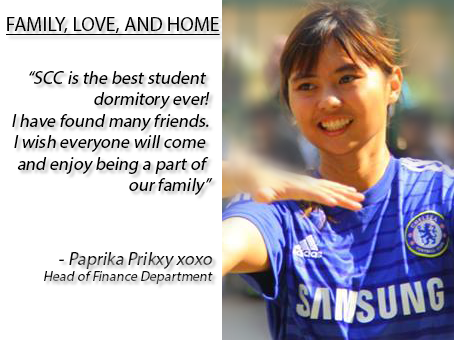
<style>
.page{position:relative;width:454px;height:340px;background:#ffffff}
.page>*{position:absolute;margin:0}
.t1{font:20px "MyriadPro-Regular";color:#000000;text-decoration:underline}
.t2{font:18px "MyriadPro-Regular";color:#000000;font-style:italic}
.t3{font:14px "MyriadPro-Regular";font-style:italic}
.t4{font:18px "MyriadPro-Regular";font-style:italic}
</style>
<div class="page">
<p class="t1" style="left:6px;top:17px;width:214px;height:18px">FAMILY, LOVE, AND HOME</p>
<p class="t2" style="left:12px;top:71px;width:201px;height:124px;text-align:right">“SCC is the best student <br>dormitory ever!<br>I have found many friends.<br>I wish everyone will come <br>and enjoy being a part of <br>our family”</p>
<p class="t3" style="left:44px;top:252px;width:169px;height:32px;text-align:right"><span class="t4">- Paprika Prikxy xoxo<br></span>Head of Finance Department</p>
</div>
